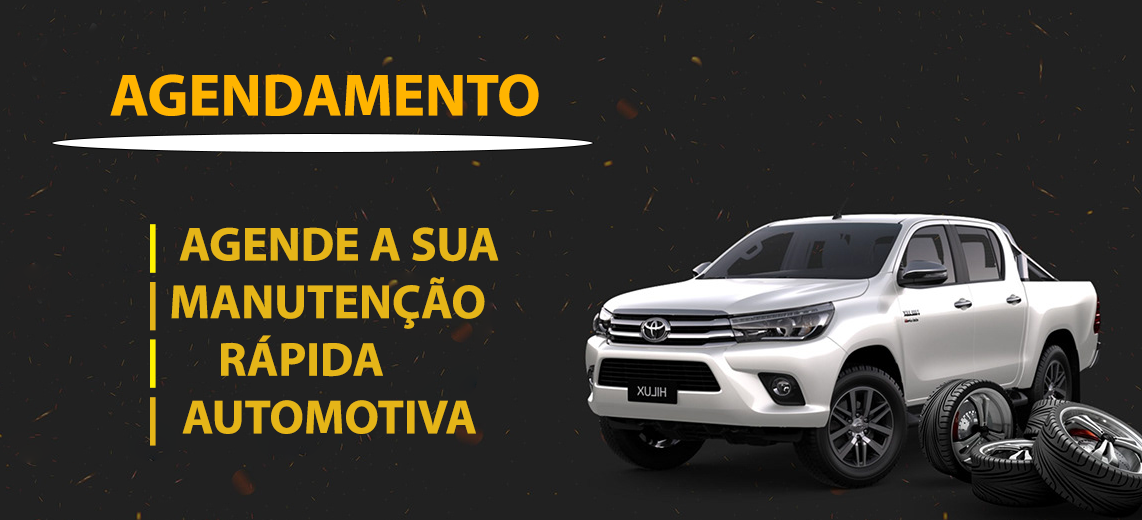
<style>
.page{position:relative;width:1142px;height:520px;background:#212121}
.page>*{position:absolute;margin:0}
.t1{font:60px "MyriadPro-Bold";color:#ffb400}
.t2{font:48px "MyriadPro-Bold";color:#e5b518}
.t3{font:48px "MyriadPro-Bold";color:#fff200}
</style>
<div class="page">
<p class="t1" style="left:110px;top:74px;width:429px;height:43px">AGENDAMENTO</p>
<p class="t2" style="left:150px;top:224px;width:349px;height:222px"><span class="t3">|  </span>AGENDE A SUA<br>| MANUTENÇÃO<br><span class="t3">|  </span>RÁPIDA <br>| AUTOMOTIVA</p>
</div>
